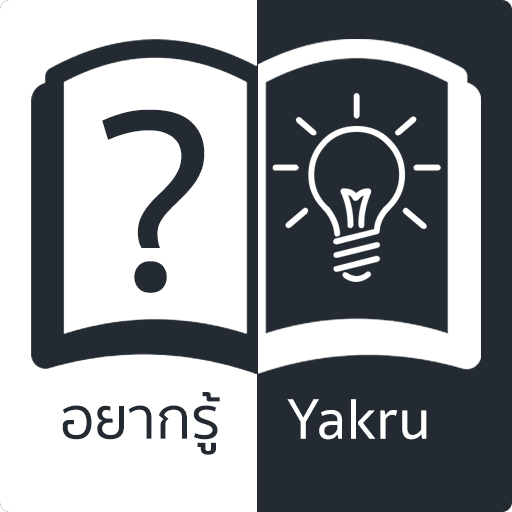
<style>
.page{position:relative;width:512px;height:512px;background:#232a31}
.page>*{position:absolute;margin:0}
.t1{font:263.5px "SukhumvitSet-Medium";color:#232a31}
.t2{font:58.5px "SukhumvitSet-Medium";color:#232a31}
.t3{font:58.5px "SukhumvitSet-Medium";color:#ffffff}
</style>
<div class="page">
<p class="t1" style="left:102px;top:109px;width:103px;height:184px">?</p>
<p class="t2" style="left:62px;top:392px;width:158px;height:63px">อยากรู้</p>
<p class="t3" style="left:287px;top:399px;width:140px;height:41px">Yakru</p>
</div>
